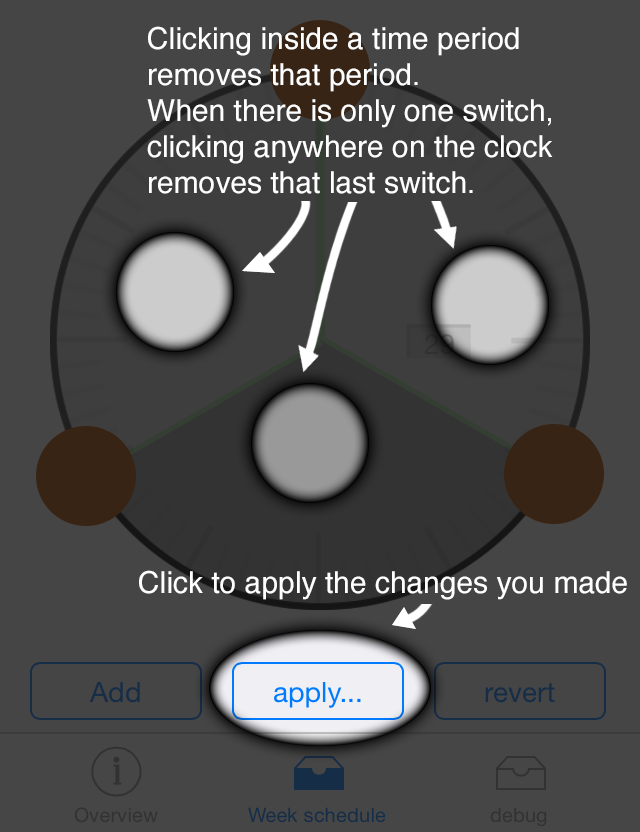
<style>
.page{position:relative;width:640px;height:832px;background:#454546}
.page>*{position:absolute;margin:0}
.t1{font:30px "Helvetica";color:#ffffff}
.t2{font:30.1px "Helvetica";color:#ffffff}
</style>
<div class="page">
<p class="t1" style="left:147px;top:26px;width:406px;height:168px">Clicking inside a time period<br>removes that period.<br>When there is only one switch,<br>clicking anywhere on the clock<br>removes that last switch.</p>
<p class="t2" style="left:139px;top:570px;width:488px;height:30px">Click to apply the changes you made</p>
</div>
